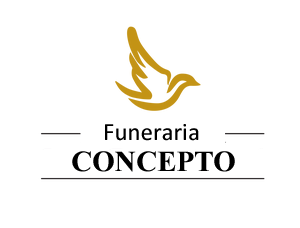
<style>
.page{position:relative;width:300px;height:228px;background:#ffffff}
.page>*{position:absolute;margin:0}
.t1{font:25px "Calibri";color:#000000}
.t2{font:29.2px "TimesNewRomanPS-BoldMT";color:#000000}
</style>
<div class="page">
<p class="t1" style="left:105px;top:124px;width:94px;height:17px">Funeraria</p>
<p class="t2" style="left:72px;top:151px;width:163px;height:21px">CONCEPTO</p>
</div>
